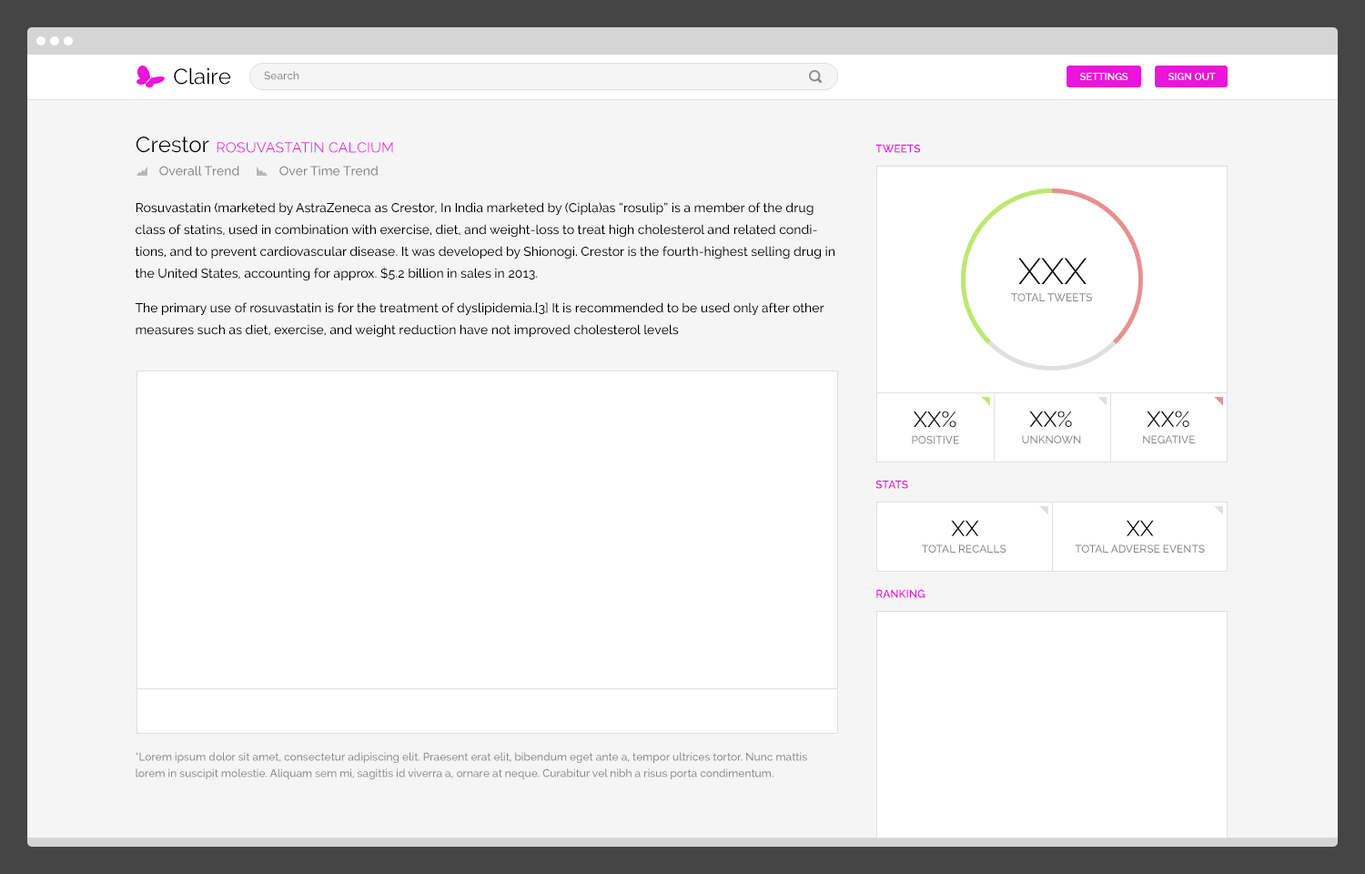
<style>
.page{position:relative;width:1365px;height:874px;background:#ffffff}
.page>*{position:absolute;margin:0}
.t1{font:21.8px "Raleway-Regular";color:#000000}
.t2{font:10.9px "Raleway-Medium";color:#858585}
.t3{font:10px "Raleway-SemiBold";color:#ffffff;text-transform:uppercase}
.t4{font:14.6px "Raleway-Regular";color:#ec13da;text-transform:uppercase}
.t5{font:10.9px "Raleway-SemiBold";color:#ec13da;text-transform:uppercase}
.t6{font:12.7px "Raleway-Medium";color:#858585}
.t7{font:12.7px/21.8px "Raleway-Medium";color:#000000}
.t8{font:36.6px "Raleway-Light";color:#000000}
.t9{font:11px "Raleway-Medium";color:#858585;text-transform:uppercase}
.t10{font:21.7px "Raleway-Regular";color:#000000}
.t11{font:10.9px "Raleway-Medium";color:#858585;text-transform:uppercase}
.t12{font:10.9px/16.4px "Raleway-Medium";color:#858585}
</style>
<div class="page">
<p class="t1" style="left:174px;top:67px;width:57px;height:18px">Claire</p>
<p class="t2" style="left:264px;top:71px;width:35px;height:9px">Search</p>
<p class="t3" style="left:1080px;top:73px;width:48px;height:7px">Settings</p>
<p class="t3" style="left:1168px;top:73px;width:48px;height:7px">Sign Out</p>
<p class="t1" style="left:136px;top:136px;width:73px;height:17px">Crestor</p>
<p class="t4" style="left:217px;top:142px;width:176px;height:11px">Rosuvastatin Calcium</p>
<p class="t5" style="left:875px;top:144px;width:46px;height:9px">Tweets</p>
<p class="t6" style="left:159px;top:166px;width:80px;height:10px">Overall Trend</p>
<p class="t6" style="left:279px;top:166px;width:100px;height:10px">Over Time Trend</p>
<p class="t7" style="left:135px;top:202px;width:699px;height:136px">Rosuvastatin (marketed by AstraZeneca as Crestor, In India marketed by (Cipla)as “rosulip” is a member of the drug class of statins, used in combination with exercise, diet, and weight-loss to treat high cholesterol and related conditions, and to prevent cardiovascular disease. It was developed by Shionogi. Crestor is the fourth-highest selling drug in the United States, accounting for approx. $5.2 billion in sales in 2013.<br><br>The primary use of rosuvastatin is for the treatment of dyslipidemia.[3] It is recommended to be used only after other measures such as diet, exercise, and weight reduction have not improved cholesterol levels</p>
<p class="t8" style="left:1018px;top:258px;width:69px;height:26px">XXX</p>
<p class="t9" style="left:1011px;top:293px;width:81px;height:8px">Total Tweets</p>
<p class="t1" style="left:913px;top:410px;width:43px;height:18px">XX%</p>
<p class="t10" style="left:1029px;top:410px;width:43px;height:17px">XX%</p>
<p class="t10" style="left:1147px;top:410px;width:42px;height:17px">XX%</p>
<p class="t11" style="left:912px;top:435px;width:47px;height:9px">Positive</p>
<p class="t11" style="left:1022px;top:435px;width:59px;height:8px">Unknown</p>
<p class="t11" style="left:1143px;top:435px;width:52px;height:8px">Negative</p>
<p class="t5" style="left:875px;top:480px;width:33px;height:9px">Stats</p>
<p class="t10" style="left:951px;top:520px;width:28px;height:16px">XX</p>
<p class="t10" style="left:1126px;top:520px;width:28px;height:16px">XX</p>
<p class="t11" style="left:922px;top:544px;width:84px;height:8px">Total Recalls</p>
<p class="t11" style="left:1075px;top:544px;width:130px;height:8px">Total Adverse Events</p>
<p class="t5" style="left:876px;top:589px;width:49px;height:9px">Ranking</p>
<p class="t12" style="left:136px;top:752px;width:671px;height:27px">*Lorem ipsum dolor sit amet, consectetur adipiscing elit. Praesent erat elit, bibendum eget ante a, tempor ultrices tortor. Nunc mattis lorem in suscipit molestie. Aliquam sem mi, sagittis id viverra a, ornare at neque. Curabitur vel nibh a risus porta condimentum.</p>
</div>
